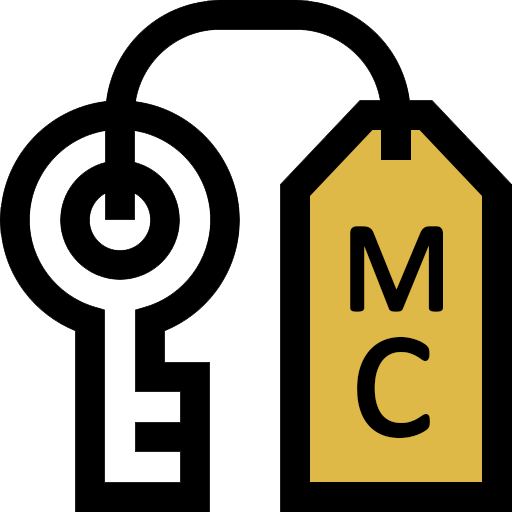
<style>
.page{position:relative;width:512px;height:512px;background:#ffffff}
.page>*{position:absolute;margin:0}
.t1{font:130px "Calibri";color:#000000;font-weight:bold}
.t2{font:150px "Calibri";color:#000000;font-weight:bold}
</style>
<div class="page">
<p class="t1" style="left:350px;top:226px;width:93px;height:86px">M</p>
<p class="t2" style="left:357px;top:336px;width:73px;height:103px">C</p>
</div>
